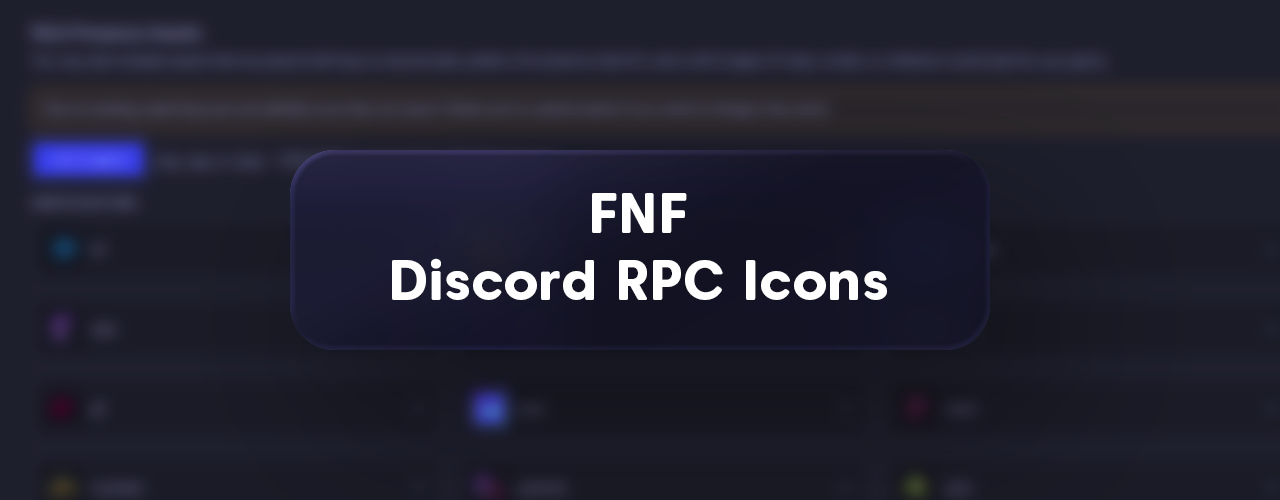
<style>
.page{position:relative;width:1280px;height:500px}
.page>*{position:absolute;margin:0}
.t1{font:55.6px "CarosSoftExtraBold";color:#ffffff}
</style>
<div class="page">
<p class="t1" style="left:392px;top:193px;width:495px;height:107px;text-align:center">FNF<br>Discord RPC Icons</p>
</div>
